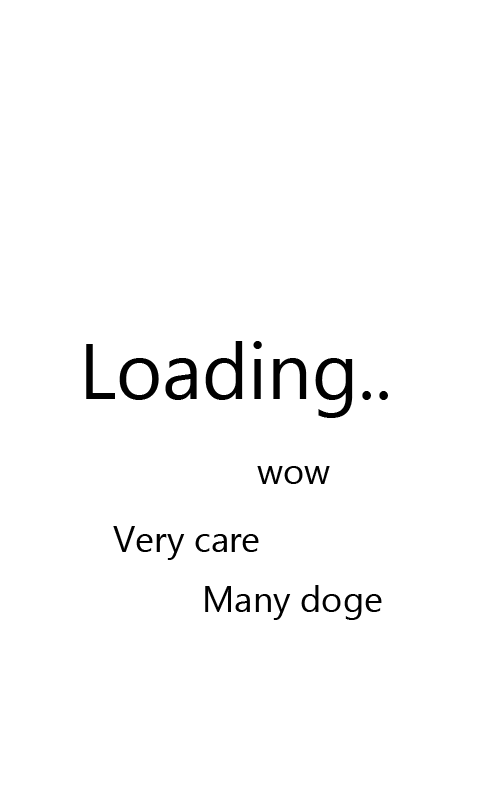
<style>
.page{position:relative;width:480px;height:800px;background:#ffffff}
.page>*{position:absolute;margin:0}
.t1{font:78.5px "KhmerUI";color:#000000}
.t2{font:36px "KhmerUI";color:#000000}
</style>
<div class="page">
<p class="t1" style="left:86px;top:341px;width:302px;height:77px">Loading..</p>
<p class="t2" style="left:257px;top:466px;width:73px;height:18px">wow</p>
<p class="t2" style="left:113px;top:526px;width:146px;height:34px">Very care</p>
<p class="t2" style="left:205px;top:585px;width:177px;height:35px">Many doge</p>
</div>
